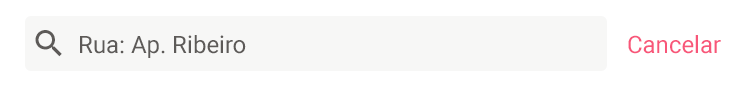
<style>
.page{position:relative;width:750px;height:88px;background:#ffffff}
.page>*{position:absolute;margin:0}
.t1{font:24px "Roboto-Regular";color:#5d5a58}
.t2{font:24px "Roboto-Regular";color:#f85679}
</style>
<div class="page">
<p class="t1" style="left:80px;top:35px;width:166px;height:23px">Rua: Ap. Ribeiro</p>
<p class="t2" style="left:628px;top:35px;width:93px;height:19px">Cancelar</p>
</div>
